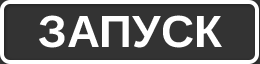
<style>
.page{position:relative;width:260px;height:64px;background:#333333}
.page>*{position:absolute;margin:0}
.t1{font:45px "LiberationSans-Bold";color:#ffffff;text-transform:uppercase}
</style>
<div class="page">
<p class="t1" style="left:39px;top:15px;width:183px;height:33px">запуск</p>
</div>
